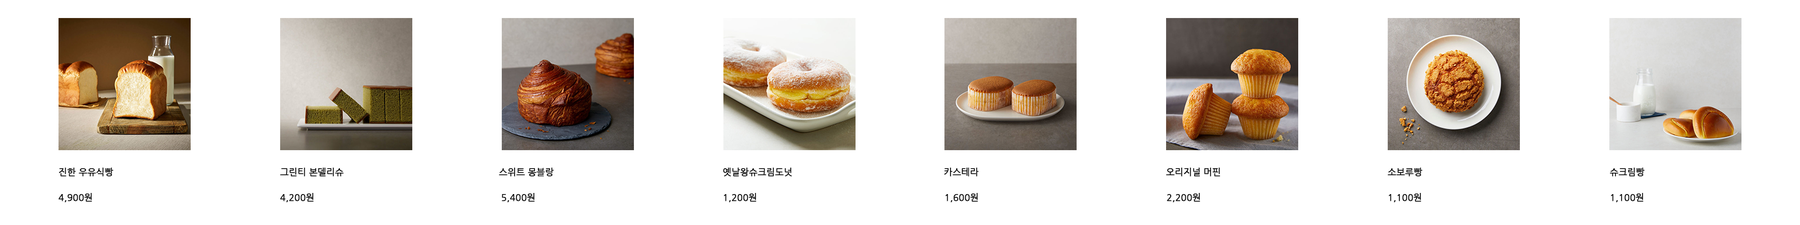
<style>
.page{position:relative;width:1800px;height:225px;background:#ffffff}
.page>*{position:absolute;margin:0}
.t1{font:9px "NanumGothic";color:#000000;font-weight:bold}
</style>
<div class="page">
<p class="t1" style="left:58px;top:168px;width:56px;height:9px">진한 우유식빵</p>
<p class="t1" style="left:280px;top:168px;width:64px;height:9px">그린티 본델리슈</p>
<p class="t1" style="left:499px;top:168px;width:55px;height:9px">스위트 몽블랑</p>
<p class="t1" style="left:723px;top:168px;width:69px;height:9px">옛날왕슈크림도넛</p>
<p class="t1" style="left:944px;top:168px;width:35px;height:9px">카스테라</p>
<p class="t1" style="left:1166px;top:168px;width:54px;height:9px">오리지널 머핀</p>
<p class="t1" style="left:1388px;top:168px;width:35px;height:9px">소보루빵</p>
<p class="t1" style="left:1610px;top:168px;width:35px;height:9px">슈크림빵</p>
<p class="t1" style="left:58px;top:193px;width:34px;height:9px">4,900원</p>
<p class="t1" style="left:280px;top:193px;width:34px;height:9px">4,200원</p>
<p class="t1" style="left:502px;top:193px;width:33px;height:9px">5,400원</p>
<p class="t1" style="left:724px;top:193px;width:33px;height:9px">1,200원</p>
<p class="t1" style="left:946px;top:193px;width:32px;height:9px">1,600원</p>
<p class="t1" style="left:1167px;top:193px;width:33px;height:9px">2,200원</p>
<p class="t1" style="left:1389px;top:193px;width:32px;height:9px">1,100원</p>
<p class="t1" style="left:1611px;top:193px;width:33px;height:9px">1,100원</p>
</div>
